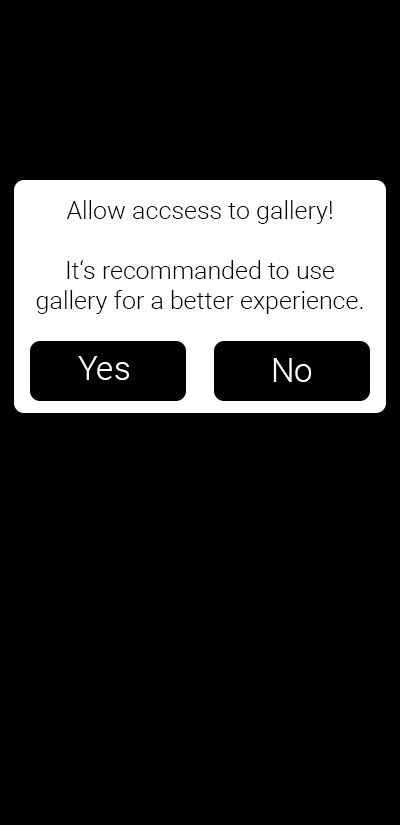
<style>
.page{position:relative;width:400px;height:825px;background:#000000}
.page>*{position:absolute;margin:0}
.t1{font:25px "Roboto-Light";color:#000000}
.t2{font:33.3px "Roboto-Light";color:#ffffff}
</style>
<div class="page">
<p class="t1" style="left:36px;top:200px;width:327px;height:114px;text-align:center">Allow accsess to gallery!<br><br>It‘s recommanded to use <br>gallery for a better experience.</p>
<p class="t2" style="left:78px;top:356px;width:51px;height:24px">Yes</p>
<p class="t2" style="left:273px;top:358px;width:39px;height:24px">No</p>
</div>
